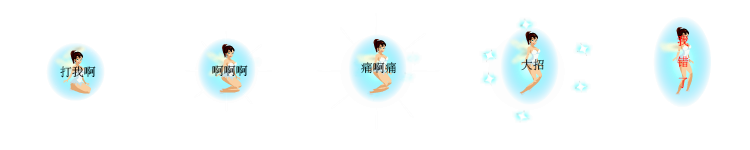
<style>
.page{position:relative;width:750px;height:150px;background:#ffffff}
.page>*{position:absolute;margin:0}
.t1{font:12px "SimSun"}
</style>
<div class="page">
<p class="t1" style="left:677px;top:35px;width:12px;height:54px">我<br>错<br>了</p>
<p class="t1" style="left:212px;top:65px;width:36px;height:11px">啊啊啊</p>
<p class="t1" style="left:361px;top:62px;width:35px;height:12px">痛啊痛</p>
<p class="t1" style="left:521px;top:59px;width:23px;height:12px">大招</p>
<p class="t1" style="left:60px;top:66px;width:36px;height:12px">打我啊</p>
</div>
